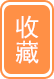
<style>
.page{position:relative;width:54px;height:79px;background:#ff9046}
.page>*{position:absolute;margin:0}
.t1{font:24.8px "SimHei";color:#ffffff;text-transform:uppercase}
</style>
<div class="page">
<p class="t1" style="left:15px;top:15px;width:24px;height:49px;text-align:center">收藏</p>
</div>
